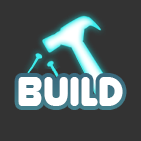
<style>
.page{position:relative;width:141px;height:141px;background:#333333}
.page>*{position:absolute;margin:0}
.t1{font:48px "Junegull";color:#ffffff}
</style>
<div class="page">
<p class="t1" style="left:18px;top:77px;width:105px;height:29px">BUILD</p>
</div>
